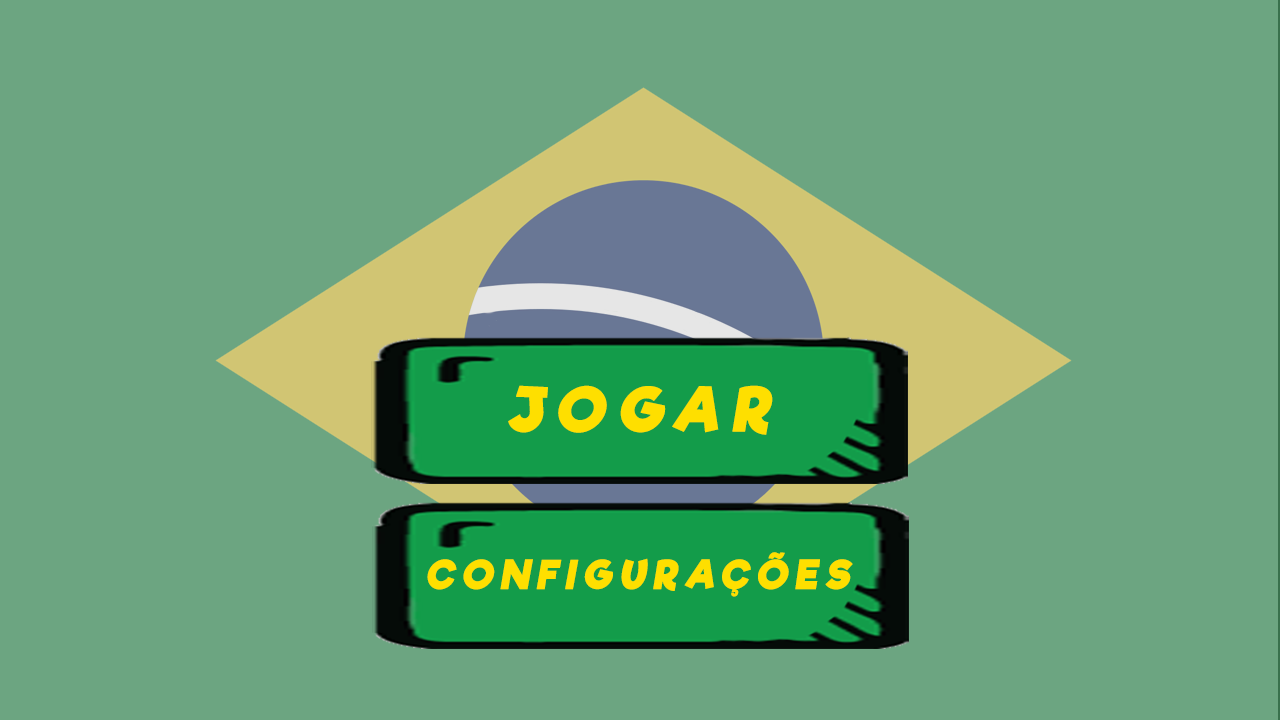
<style>
.page{position:relative;width:1280px;height:720px;background:#6ca581}
.page>*{position:absolute;margin:0}
.t1{font:60px "RifficFree-Bold";letter-spacing:0.2em;color:#fedf00;font-weight:bold;font-style:italic}
.t2{font:38px "RifficFree-Bold";letter-spacing:0.2em;color:#fedf00;font-weight:bold;font-style:italic}
</style>
<div class="page">
<p class="t1" style="left:508px;top:385px;width:265px;height:50px">JOGAR</p>
<p class="t2" style="left:427px;top:552px;width:426px;height:45px">CONFIGURAÇÕES</p>
</div>
